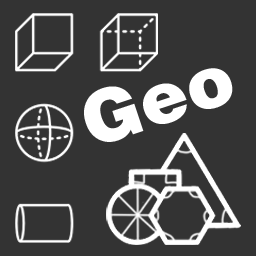
<style>
.page{position:relative;width:256px;height:256px;background:#333333}
.page>*{position:absolute;margin:0}
.t1{font:72px "HelveticaBlack";color:#ffffff}
</style>
<div class="page">
<p class="t1" style="left:84px;top:68px;width:149px;height:74px;rotate:-18deg">Geo</p>
</div>
